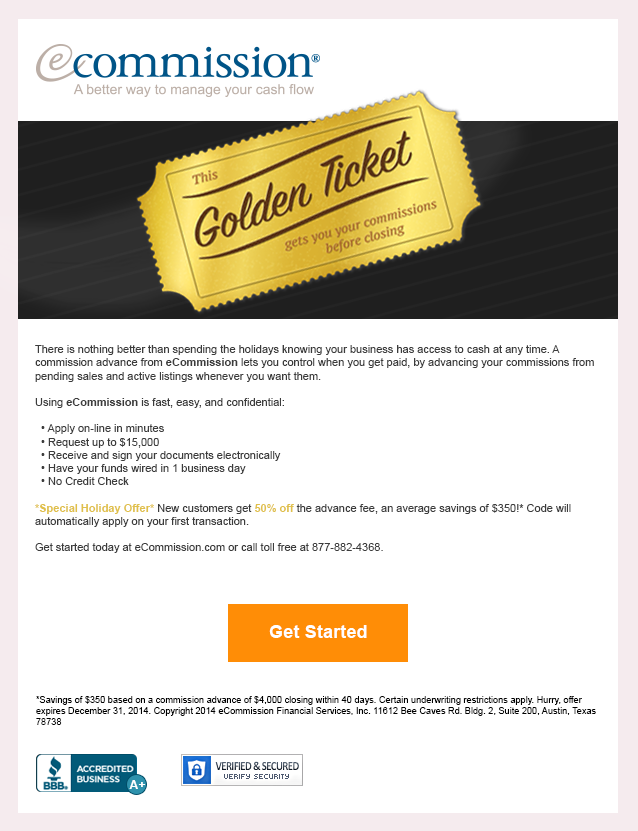
<style>
.page{position:relative;width:638px;height:831px;background:#ffffff}
.page>*{position:absolute;margin:0}
.t1{font:12px "ArialMT";color:#3c3c3c}
.t2{font:12px "Arial-BoldMT";color:#3c3c3c}
.t3{font:12px "Arial-BoldMT";color:#e0c04a}
.t4{font:18.3px "Arial-BoldMT";color:#ffffff}
.t5{font:9.2px "ArialMT";color:#000000}
</style>
<div class="page">
<p class="t1" style="left:35px;top:345px;width:559px;height:208px">There is nothing better than spending the holidays knowing your business has access to cash at any time. A commission advance from <span class="t2">eCommission</span> lets you control when you get paid, by advancing your commissions from pending sales and active listings whenever you want them.  <br><br>Using <span class="t2">eCommission</span> is fast, easy, and confidential:<br><br>  • Apply on-line in minutes<br>  • Request up to $15,000<br>  • Receive and sign your documents electronically<br>  • Have your funds wired in 1 business day<br>  • No Credit Check<br><br><span class="t3">*Special Holiday Offer*</span> New customers get <span class="t3">50% off</span> the advance fee, an average savings of $350!* Code will automatically apply on your first transaction. <br><br>Get started today at eCommission.com or call toll free at 877-882-4368.</p>
<p class="t4" style="left:269px;top:625px;width:98px;height:13px">Get Started</p>
<p class="t5" style="left:36px;top:696px;width:560px;height:29px">*Savings of $350 based on a commission advance of $4,000 closing within 40 days. Certain underwriting restrictions apply. Hurry, offer expires December 31, 2014. Copyright 2014 eCommission Financial Services, Inc. 11612 Bee Caves Rd. Bldg. 2, Suite 200, Austin, Texas 78738</p>
</div>
